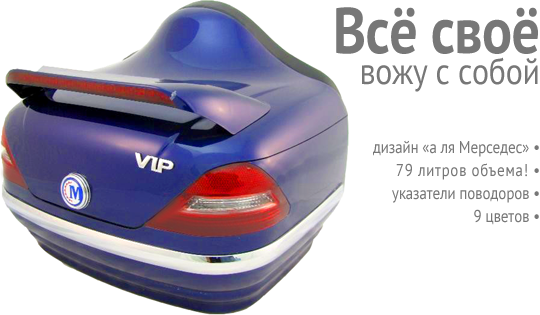
<style>
.page{position:relative;width:540px;height:315px;background:#ffffff}
.page>*{position:absolute;margin:0}
.t1{font:17.2px/23px "PTSans-Regular";letter-spacing:-0.01em;color:#777777;scale:0.87 1}
.t2{font:64.4px/21px "PTSans-Bold";letter-spacing:-0.01em;color:#777777;scale:0.87 1}
.t3{font:36.8px/31px "PTSans-Regular";letter-spacing:-0.01em;color:#777777;scale:0.87 1}
.t4{font:17.2px/23px "PTSans-Regular";letter-spacing:0.04em;color:#777777;scale:0.87 1}
</style>
<div class="page">
<p class="t1" style="left:336px;top:7px;width:203px;height:218px;text-align:right"><span class="t2">Всё своё<br></span><span class="t3">вожу с собой<br><br><br></span>дизайн «а ля Мерседес» •<br><span class="t4">79 литров объема! •<br></span>указатели поводоров •<br>9 цветов •</p>
</div>
